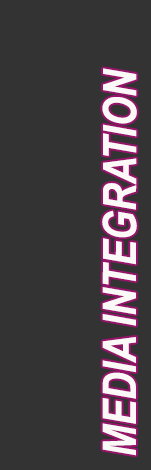
<style>
.page{position:relative;width:151px;height:470px;background:#333333}
.page>*{position:absolute;margin:0}
.t1{font:46px "ArialNarrow-BoldItalic";color:#fbf8f8}
</style>
<div class="page">
<p class="t1" style="left:102px;top:68px;width:35px;height:388px;rotate:-90deg">MEDIA INTEGRATION</p>
</div>
